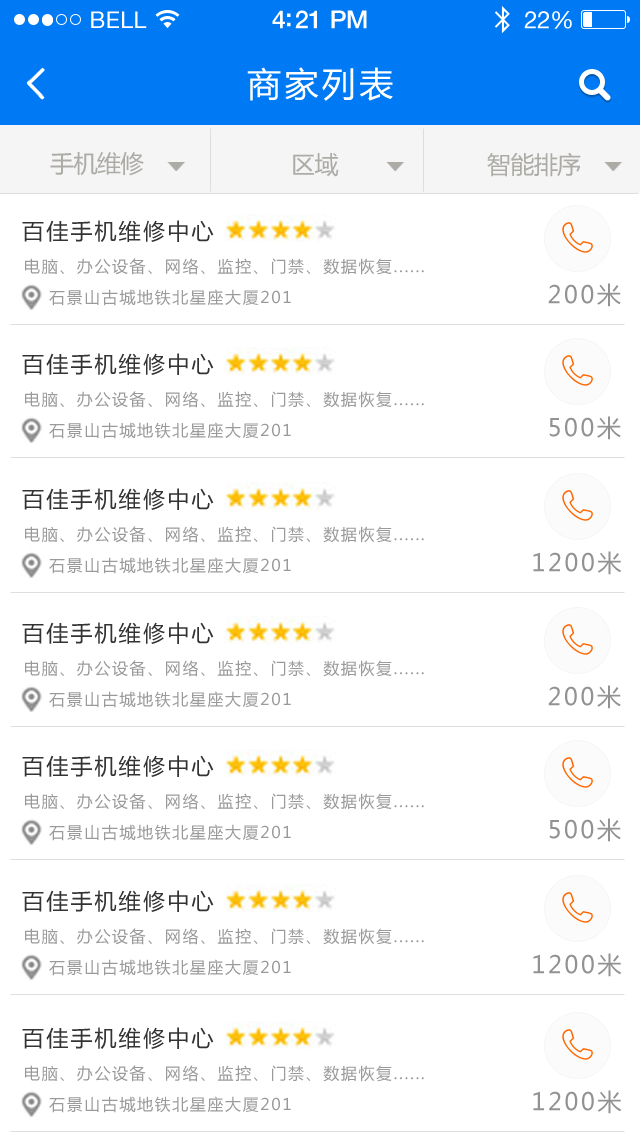
<style>
.page{position:relative;width:640px;height:1136px;background:#ffffff}
.page>*{position:absolute;margin:0}
.t1{font:23px "HelveticaNeue";letter-spacing:0.02em;color:#ffffff}
.t2{font:25px "HelveticaNeue-Medium";letter-spacing:-0.02em;color:#ffffff}
.t3{font:24px "HelveticaNeue";letter-spacing:-0.02em;color:#ffffff}
.t4{font:34px "MicrosoftYaHei";letter-spacing:0.1em;color:#ffffff}
.t5{font:24px "MicrosoftYaHei";letter-spacing:-0.025em;color:#acaba6}
.t6{font:22px "MicrosoftYaHei";letter-spacing:0.1em;color:#333333}
.t7{font:16px "MicrosoftYaHei";letter-spacing:0.1em;color:#9a9a9a}
.t8{font:24px "MicrosoftYaHei";letter-spacing:0.1em;color:#929292}
</style>
<div class="page">
<p class="t1" style="left:91px;top:11px;width:56px;height:17px">BELL</p>
<p class="t2" style="left:272px;top:10px;width:95px;height:19px">4:21 PM</p>
<p class="t3" style="left:524px;top:11px;width:48px;height:18px">22%</p>
<p class="t4" style="left:247px;top:67px;width:146px;height:34px">商家列表</p>
<p class="t5" style="left:50px;top:152px;width:94px;height:24px">手机维修</p>
<p class="t5" style="left:293px;top:153px;width:46px;height:24px">区域</p>
<p class="t5" style="left:487px;top:152px;width:94px;height:25px">智能排序</p>
<p class="t6" style="left:22px;top:220px;width:192px;height:22px">百佳手机维修中心</p>
<p class="t7" style="left:25px;top:258px;width:399px;height:17px">电脑、办公设备、网络、监控、门禁、数据恢复......</p>
<p class="t7" style="left:49px;top:289px;width:242px;height:17px">石景山古城地铁北星座大厦201</p>
<p class="t8" style="left:548px;top:283px;width:73px;height:24px">200米</p>
<p class="t6" style="left:22px;top:353px;width:192px;height:22px">百佳手机维修中心</p>
<p class="t7" style="left:25px;top:391px;width:399px;height:17px">电脑、办公设备、网络、监控、门禁、数据恢复......</p>
<p class="t7" style="left:49px;top:422px;width:242px;height:17px">石景山古城地铁北星座大厦201</p>
<p class="t8" style="left:549px;top:416px;width:72px;height:24px">500米</p>
<p class="t6" style="left:22px;top:488px;width:192px;height:22px">百佳手机维修中心</p>
<p class="t7" style="left:25px;top:526px;width:399px;height:17px">电脑、办公设备、网络、监控、门禁、数据恢复......</p>
<p class="t7" style="left:49px;top:557px;width:242px;height:17px">石景山古城地铁北星座大厦201</p>
<p class="t8" style="left:533px;top:551px;width:89px;height:24px">1200米</p>
<p class="t6" style="left:22px;top:622px;width:192px;height:22px">百佳手机维修中心</p>
<p class="t7" style="left:25px;top:660px;width:399px;height:17px">电脑、办公设备、网络、监控、门禁、数据恢复......</p>
<p class="t8" style="left:548px;top:685px;width:73px;height:24px">200米</p>
<p class="t7" style="left:49px;top:691px;width:242px;height:17px">石景山古城地铁北星座大厦201</p>
<p class="t6" style="left:22px;top:755px;width:192px;height:22px">百佳手机维修中心</p>
<p class="t7" style="left:25px;top:793px;width:399px;height:17px">电脑、办公设备、网络、监控、门禁、数据恢复......</p>
<p class="t8" style="left:549px;top:818px;width:72px;height:24px">500米</p>
<p class="t7" style="left:49px;top:824px;width:242px;height:17px">石景山古城地铁北星座大厦201</p>
<p class="t6" style="left:22px;top:890px;width:192px;height:22px">百佳手机维修中心</p>
<p class="t7" style="left:25px;top:928px;width:399px;height:17px">电脑、办公设备、网络、监控、门禁、数据恢复......</p>
<p class="t8" style="left:533px;top:953px;width:89px;height:24px">1200米</p>
<p class="t7" style="left:49px;top:959px;width:242px;height:17px">石景山古城地铁北星座大厦201</p>
<p class="t6" style="left:22px;top:1027px;width:192px;height:22px">百佳手机维修中心</p>
<p class="t7" style="left:25px;top:1065px;width:399px;height:17px">电脑、办公设备、网络、监控、门禁、数据恢复......</p>
<p class="t7" style="left:49px;top:1096px;width:242px;height:17px">石景山古城地铁北星座大厦201</p>
<p class="t8" style="left:533px;top:1090px;width:89px;height:24px">1200米</p>
</div>
